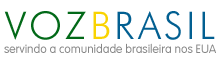
<style>
.page{position:relative;width:220px;height:66px;background:#ffffff}
.page>*{position:absolute;margin:0}
.t1{font:38px "FuturaBT-Light";letter-spacing:0.09em;color:#025f91}
.t2{font:38px "FuturaBT-Light";letter-spacing:0.09em;color:#026918}
.t3{font:38px "FuturaBT-Light";letter-spacing:0.09em;color:#f9d301}
.t4{font:12px "VAGRounded-Lt-Normal";color:#878787}
</style>
<div class="page">
<p class="t1" style="left:4px;top:11px;width:211px;height:29px"><span class="t2">VOZ</span><span class="t3">B</span>RASIL</p>
<p class="t4" style="left:4px;top:43px;width:212px;height:10px">servindo a comunidade brasileira nos EUA</p>
</div>
